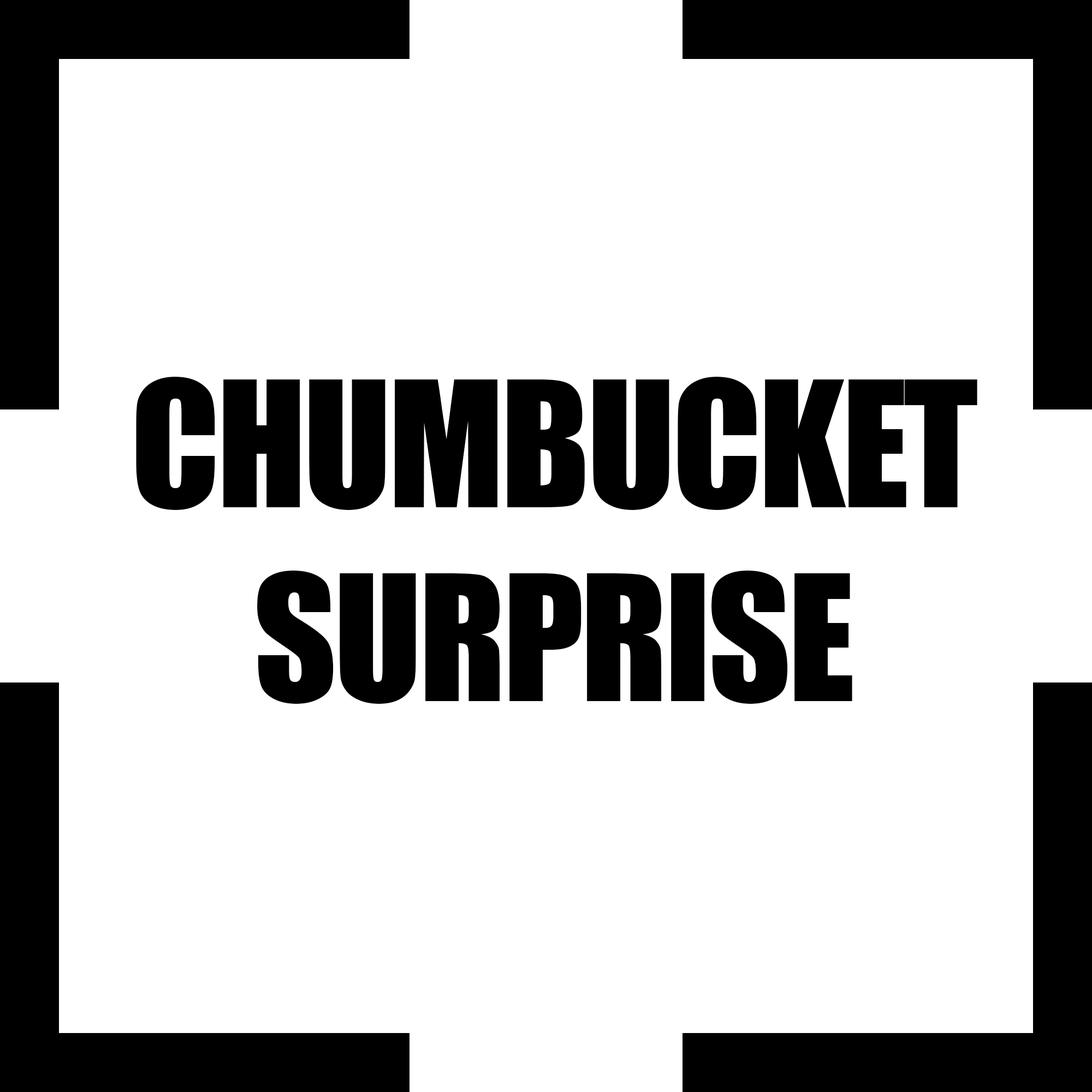
<style>
.page{position:relative;width:1092px;height:1092px;background:#ffffff}
.page>*{position:absolute;margin:0}
.t1{font:161.6px "Impact";letter-spacing:-0.02em;color:#000000}
</style>
<div class="page">
<p class="t1" style="left:136px;top:377px;width:841px;height:327px;text-align:center">CHUMBUCKET<br>SURPRISE</p>
</div>
